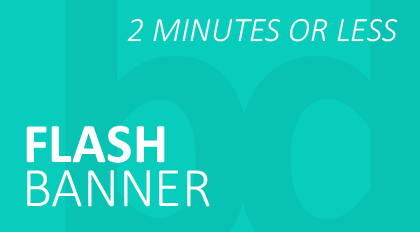
<style>
.page{position:relative;width:420px;height:232px;background:#08c3b3}
.page>*{position:absolute;margin:0}
.t1{font:34.1px "Calibri-LightItalic";color:#ffffff}
.t2{font:56.2px "Calibri-Bold";color:#ffffff}
.t3{font:56.2px "Calibri-Light";color:#ffffff}
</style>
<div class="page">
<p class="t1" style="left:127px;top:18px;width:270px;height:24px">2 MINUTES OR LESS</p>
<p class="t2" style="left:26px;top:125px;width:139px;height:38px">FLASH</p>
<p class="t3" style="left:27px;top:170px;width:183px;height:37px">BANNER</p>
</div>
